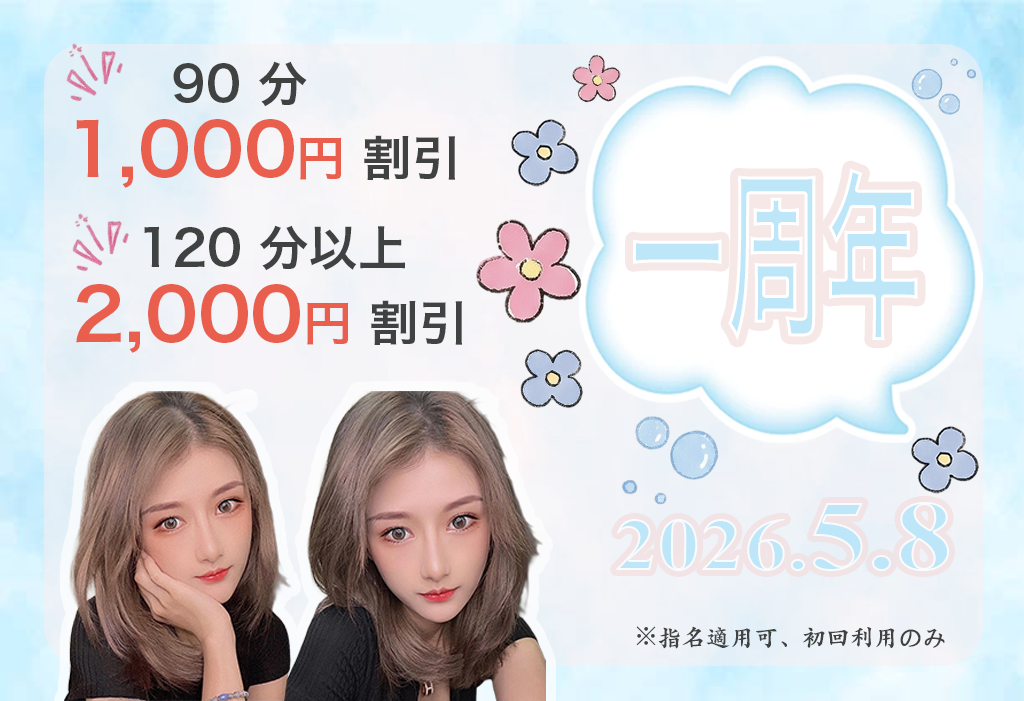
<style>
.page{position:relative;width:1024px;height:701px}
.page>*{position:absolute;margin:0}
.t1{font:48px "HiraKakuPro-W6";color:#404242;scale:1.03 1}
.t2{font:72px "HiraKakuPro-W6";color:#e95e4c;scale:1.03 1}
.t3{font:48px "HiraKakuPro-W6";color:#e95e4c;scale:1.03 1}
.t4{font:182.5px "HiraKakuPro-W6";scale:0.54 1}
.t5{font:75px "TimesNewRomanPS-BoldMT";scale:1.16 1}
.t6{font:100px "TimesNewRomanPS-BoldMT";scale:1.16 1}
.t7{font:24px "STKaitiSC-Black";color:#404242}
.t8{font:24px "HiraKakuPro-W3";color:#404242}
</style>
<div class="page">
<p class="t1" style="left:173px;top:61px;width:134px;height:46px">90 分</p>
<p class="t2" style="left:76px;top:119px;width:379px;height:69px">1,000<span class="t3">円</span><span class="t1"> 割引</span></p>
<p class="t4" style="left:633px;top:168px;width:285px;height:172px">一周年</p>
<p class="t1" style="left:144px;top:225px;width:261px;height:46px">120 分以上</p>
<p class="t2" style="left:76px;top:284px;width:386px;height:69px">2,000<span class="t3">円</span><span class="t1"> 割引</span></p>
<p class="t5" style="left:616px;top:502px;width:333px;height:69px">2026.<span class="t6">5.8</span></p>
<p class="t7" style="left:636px;top:626px;width:309px;height:23px"><span class="t8">※</span>指名適用可、初回利用のみ</p>
</div>
